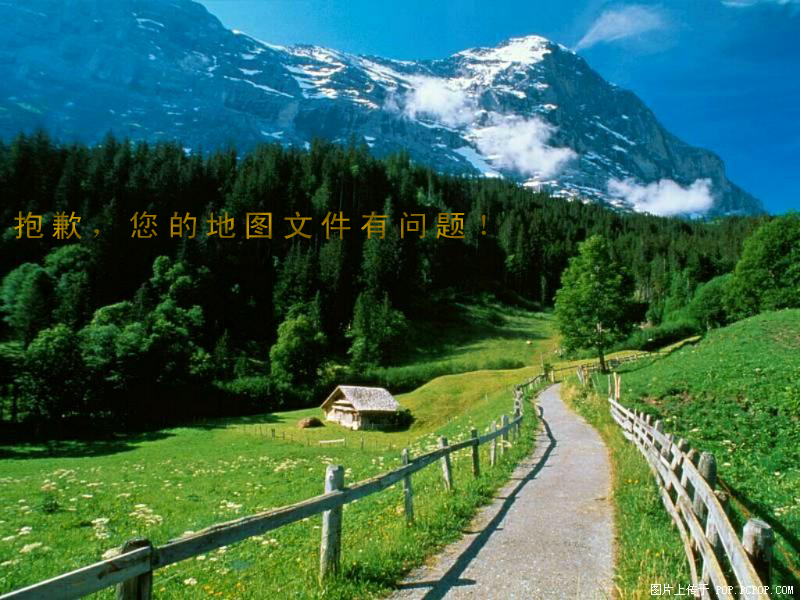
<style>
.page{position:relative;width:800px;height:600px}
.page>*{position:absolute;margin:0}
.t1{font:30.4px "SimHei";letter-spacing:0.2em;scale:1.05 1}
</style>
<div class="page">
<p class="t1" style="left:14px;top:211px;width:472px;height:28px">抱歉，您的地图文件有问题！</p>
</div>
